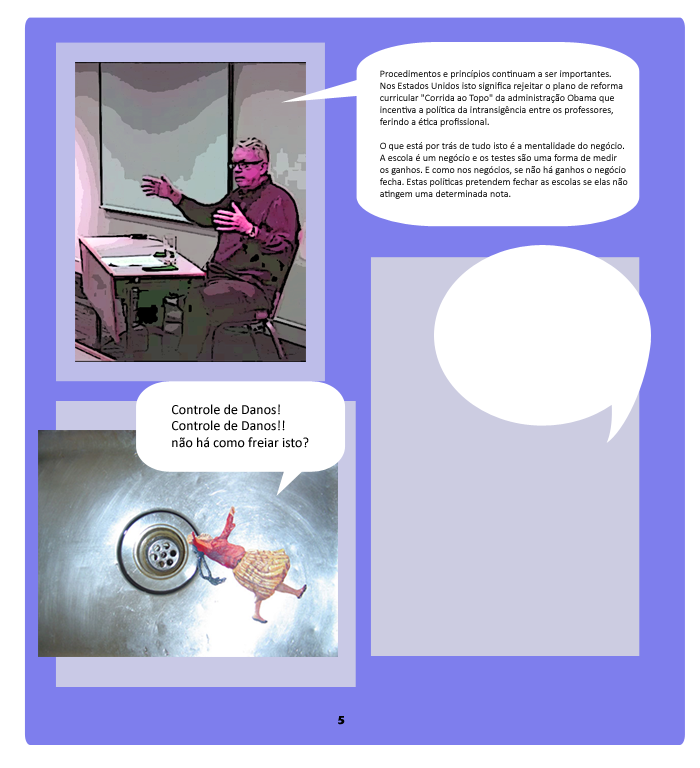
<style>
.page{position:relative;width:700px;height:768px;background:#ffffff}
.page>*{position:absolute;margin:0}
.t1{font:10px "Calibri";color:#000000}
.t2{font:14px "Calibri";color:#000000}
.t3{font:12px "ErasITC-Bold";color:#000000}
</style>
<div class="page">
<p class="t1" style="left:380px;top:70px;width:248px;height:129px">Procedimentos e princípios continuam a ser importantes. <br>Nos Estados Unidos isto significa rejeitar o plano de reforma <br>curricular "Corrida ao Topo" da administração Obama que <br>incentiva a política da intransigência entre os professores, <br>ferindo a ética profissional. <br><br>O que está por trás de tudo isto é a mentalidade do negócio. <br>A escola é um negócio e os testes são uma forma de medir <br>os ganhos. E como nos negócios, se não há ganhos o negócio <br>fecha. Estas políticas pretendem fechar as escolas se elas não <br>atingem uma determinada nota.</p>
<p class="t2" style="left:172px;top:404px;width:137px;height:44px">Controle de Danos!<br>Controle de Danos!!<br>não há como freiar isto?</p>
<p class="t3" style="left:338px;top:716px;width:7px;height:9px">5</p>
</div>
